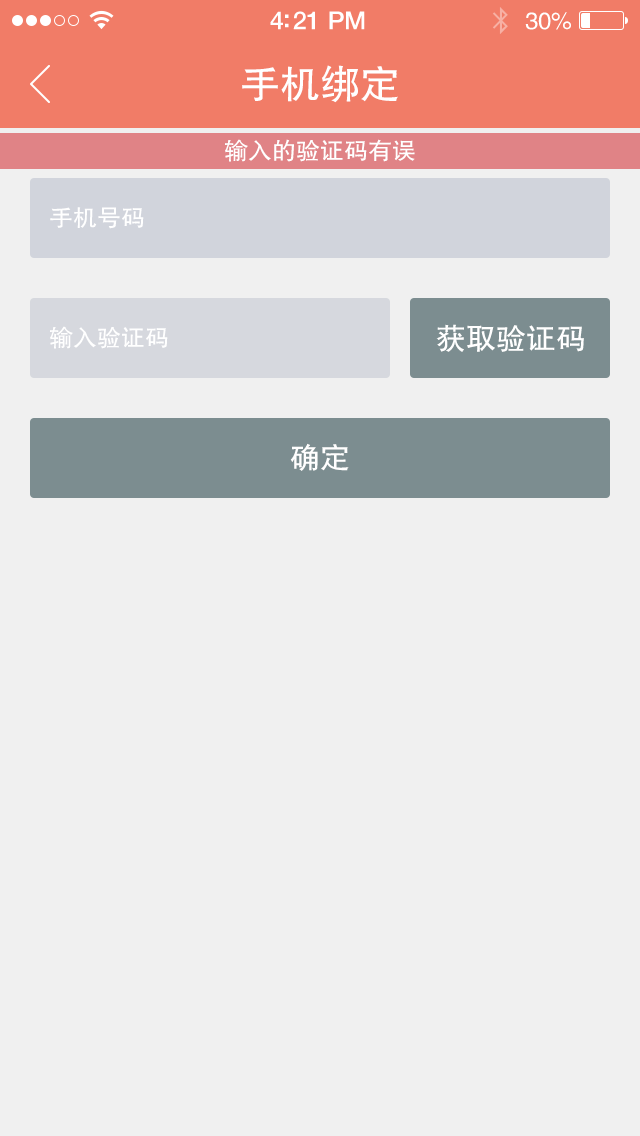
<style>
.page{position:relative;width:640px;height:1136px;background:#f0f0f0}
.page>*{position:absolute;margin:0}
.t1{font:25px "HelveticaNeue-Medium";letter-spacing:-0.02em;color:#ffffff}
.t2{font:24px "FZHTJW--GB1-0";letter-spacing:-0.02em;color:#ffffff}
.t3{font:40px "FZHTJW--GB1-0";color:#ffffff}
.t4{font:24px "FZHTJW--GB1-0";color:#ffffff}
.t5{font:30px "FZHTJW--GB1-0";color:#ffffff}
</style>
<div class="page">
<p class="t1" style="left:270px;top:11px;width:95px;height:19px">4:21 PM</p>
<p class="t2" style="left:525px;top:12px;width:46px;height:18px">30%</p>
<p class="t3" style="left:242px;top:65px;width:156px;height:38px">手机绑定</p>
<p class="t4" style="left:225px;top:139px;width:190px;height:23px">输入的验证码有误</p>
<p class="t4" style="left:50px;top:207px;width:94px;height:22px">手机号码</p>
<p class="t4" style="left:50px;top:326px;width:118px;height:23px">输入验证码</p>
<p class="t5" style="left:436px;top:324px;width:148px;height:28px">获取验证码</p>
<p class="t5" style="left:290px;top:443px;width:59px;height:28px">确定</p>
</div>
